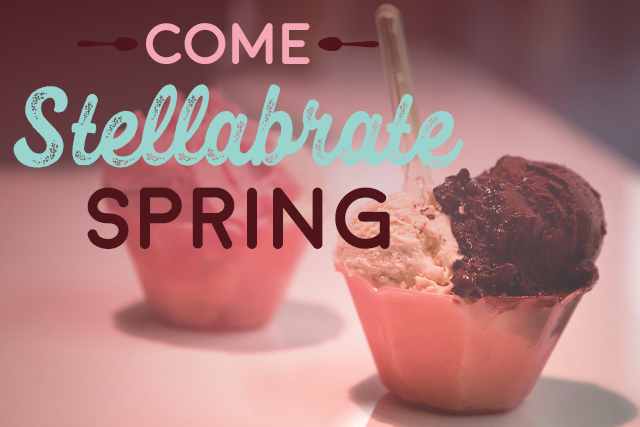
<style>
.page{position:relative;width:640px;height:427px}
.page>*{position:absolute;margin:0}
.t1{font:58.3px "Moon-Bold";letter-spacing:-0.045em;color:#f6a7b5}
.t2{font:119.7px "FelishaRough";color:#99d5ce}
.t3{font:137.4px "FelishaRough";color:#99d5ce}
.t4{font:87.7px "Moon-Bold";letter-spacing:-0.028em;color:#50151a}
</style>
<div class="page">
<p class="t1" style="left:146px;top:23px;width:164px;height:41px">Come</p>
<p class="t2" style="left:13px;top:84px;width:451px;height:84px"><span class="t3">S</span>tellabrate</p>
<p class="t4" style="left:87px;top:187px;width:303px;height:62px">Spring</p>
</div>
